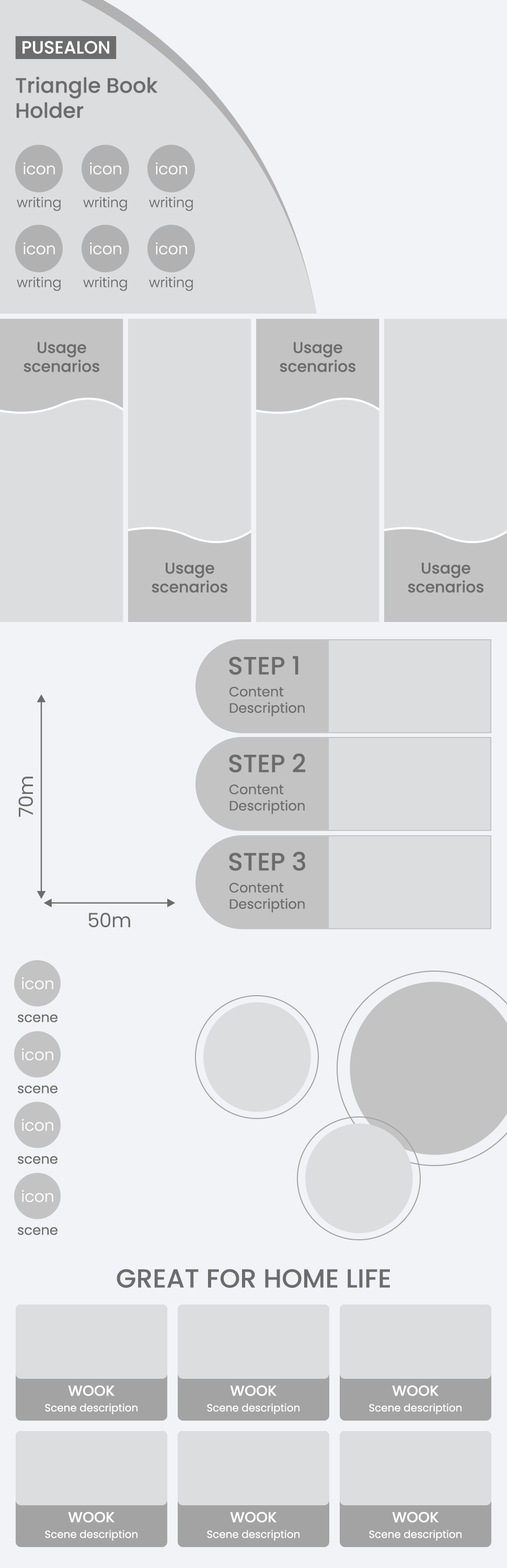
<style>
.page{position:relative;width:507px;height:1568px;background:#f2f3f6}
.page>*{position:absolute;margin:0}
.t1{font:17.7px "Poppins-Medium";color:#ffffff}
.t2{font:20.9px "Poppins-Medium";color:#6c6c6c}
.t3{font:15.7px "Poppins-Light";color:#ffffff}
.t4{font:13.6px "Poppins-Light";color:#6c6c6c}
.t5{font:15.7px "Poppins-Medium";color:#6c6c6c}
.t6{font:25.1px "Poppins-Medium";color:#6c6c6c;text-transform:uppercase}
.t7{font:13.6px "Poppins-Regular";color:#6c6c6c}
.t8{font:19.6px "Poppins-Regular";color:#6c6c6c}
.t9{font:26.1px "Poppins-Medium";color:#6c6c6c;text-transform:uppercase}
.t10{font:14.6px "Poppins-Medium";color:#ffffff;text-transform:uppercase}
.t11{font:10.5px "Poppins-Regular";color:#ffffff}
</style>
<div class="page">
<p class="t1" style="left:22px;top:41px;width:87px;height:13px">PUSEALON</p>
<p class="t2" style="left:16px;top:76px;width:142px;height:42px">Triangle Book<br>Holder</p>
<p class="t3" style="left:24px;top:162px;width:31px;height:13px">icon</p>
<p class="t3" style="left:90px;top:162px;width:31px;height:13px">icon</p>
<p class="t3" style="left:156px;top:162px;width:31px;height:13px">icon</p>
<p class="t4" style="left:17px;top:197px;width:44px;height:14px">writing</p>
<p class="t4" style="left:83px;top:197px;width:44px;height:14px">writing</p>
<p class="t4" style="left:149px;top:197px;width:44px;height:14px">writing</p>
<p class="t3" style="left:24px;top:242px;width:31px;height:13px">icon</p>
<p class="t3" style="left:90px;top:242px;width:31px;height:13px">icon</p>
<p class="t3" style="left:156px;top:242px;width:31px;height:13px">icon</p>
<p class="t4" style="left:17px;top:276px;width:44px;height:15px">writing</p>
<p class="t4" style="left:83px;top:276px;width:44px;height:15px">writing</p>
<p class="t4" style="left:149px;top:276px;width:44px;height:15px">writing</p>
<p class="t5" style="left:24px;top:342px;width:75px;height:30px;text-align:center">Usage<br>scenarios</p>
<p class="t5" style="left:280px;top:342px;width:75px;height:30px;text-align:center">Usage<br>scenarios</p>
<p class="t5" style="left:152px;top:562px;width:75px;height:31px;text-align:center">Usage<br>scenarios</p>
<p class="t5" style="left:408px;top:562px;width:75px;height:31px;text-align:center">Usage<br>scenarios</p>
<p class="t6" style="left:229px;top:656px;width:69px;height:19px">step 1</p>
<p class="t7" style="left:229px;top:687px;width:76px;height:30px">Content<br>Description</p>
<p class="t6" style="left:229px;top:753px;width:76px;height:20px">step 2</p>
<p class="t8" style="left:18px;top:777px;width:15px;height:40px;rotate:-90deg">70m</p>
<p class="t7" style="left:229px;top:785px;width:76px;height:29px">Content<br>Description</p>
<p class="t6" style="left:229px;top:851px;width:76px;height:20px">step 3</p>
<p class="t7" style="left:229px;top:883px;width:76px;height:30px">Content<br>Description</p>
<p class="t8" style="left:88px;top:913px;width:42px;height:14px">50m</p>
<p class="t3" style="left:22px;top:977px;width:31px;height:12px">icon</p>
<p class="t7" style="left:18px;top:1014px;width:39px;height:8px">scene</p>
<p class="t3" style="left:22px;top:1048px;width:31px;height:12px">icon</p>
<p class="t7" style="left:18px;top:1085px;width:39px;height:8px">scene</p>
<p class="t3" style="left:22px;top:1119px;width:31px;height:12px">icon</p>
<p class="t7" style="left:18px;top:1156px;width:39px;height:8px">scene</p>
<p class="t3" style="left:22px;top:1190px;width:31px;height:12px">icon</p>
<p class="t7" style="left:18px;top:1227px;width:39px;height:8px">scene</p>
<p class="t9" style="left:117px;top:1269px;width:273px;height:19px">Great for home life</p>
<p class="t10" style="left:68px;top:1385px;width:46px;height:11px">wook</p>
<p class="t10" style="left:230px;top:1385px;width:46px;height:11px">wook</p>
<p class="t10" style="left:392px;top:1385px;width:47px;height:11px">wook</p>
<p class="t11" style="left:45px;top:1403px;width:92px;height:11px">Scene description</p>
<p class="t11" style="left:207px;top:1403px;width:92px;height:11px">Scene description</p>
<p class="t11" style="left:369px;top:1403px;width:93px;height:11px">Scene description</p>
<p class="t10" style="left:68px;top:1512px;width:46px;height:11px">wook</p>
<p class="t10" style="left:230px;top:1512px;width:46px;height:11px">wook</p>
<p class="t10" style="left:392px;top:1512px;width:47px;height:11px">wook</p>
<p class="t11" style="left:45px;top:1530px;width:92px;height:11px">Scene description</p>
<p class="t11" style="left:207px;top:1530px;width:92px;height:11px">Scene description</p>
<p class="t11" style="left:369px;top:1530px;width:93px;height:11px">Scene description</p>
</div>
